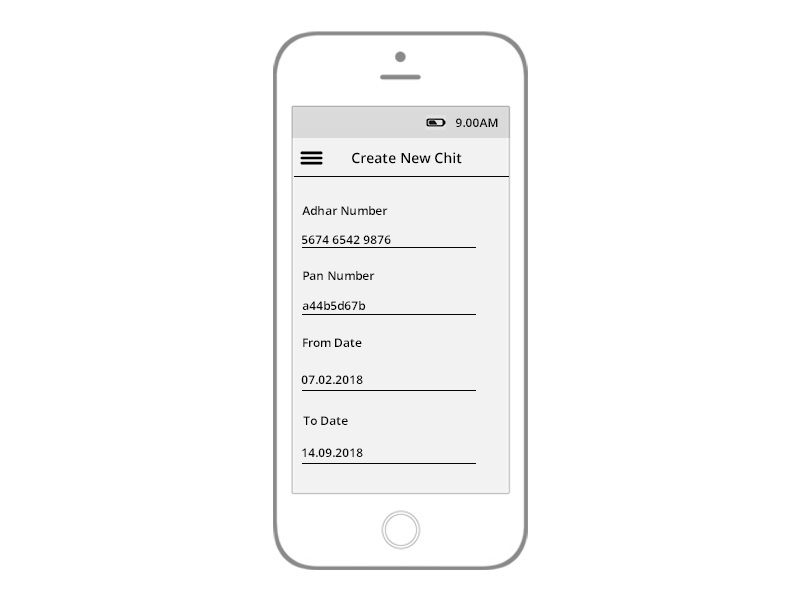
<style>
.page{position:relative;width:800px;height:600px;background:#ffffff}
.page>*{position:absolute;margin:0}
.t1{font:12px "OpenSans-Semibold";color:#030303}
.t2{font:14px "OpenSans-Semibold";color:#030303}
</style>
<div class="page">
<p class="t1" style="left:456px;top:118px;width:42px;height:9px">9.00AM</p>
<p class="t2" style="left:352px;top:152px;width:110px;height:12px">Create New Chit</p>
<p class="t1" style="left:302px;top:206px;width:86px;height:9px">Adhar Number</p>
<p class="t1" style="left:302px;top:235px;width:89px;height:9px">5674 6542 9876</p>
<p class="t1" style="left:303px;top:271px;width:72px;height:9px">Pan Number</p>
<p class="t1" style="left:302px;top:301px;width:64px;height:9px">a44b5d67b</p>
<p class="t1" style="left:303px;top:338px;width:59px;height:9px">From Date</p>
<p class="t1" style="left:301px;top:375px;width:62px;height:9px">07.02.2018</p>
<p class="t1" style="left:303px;top:416px;width:45px;height:9px">To Date</p>
<p class="t1" style="left:302px;top:448px;width:61px;height:9px">14.09.2018</p>
</div>
